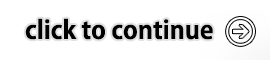
<style>
.page{position:relative;width:270px;height:60px;background:#ffffff}
.page>*{position:absolute;margin:0}
.t1{font:25px "AdobeGothicStd-Bold";color:#000000}
</style>
<div class="page">
<p class="t1" style="left:25px;top:18px;width:188px;height:22px">click to continue</p>
</div>
